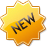
<style>
.page{position:relative;width:47px;height:47px;background:#ffffff}
.page>*{position:absolute;margin:0}
.t1{font:13px "TrebuchetMS"}
</style>
<div class="page">
<p class="t1" style="left:10px;top:12px;width:25px;height:23px;rotate:-33deg">NEW</p>
</div>
